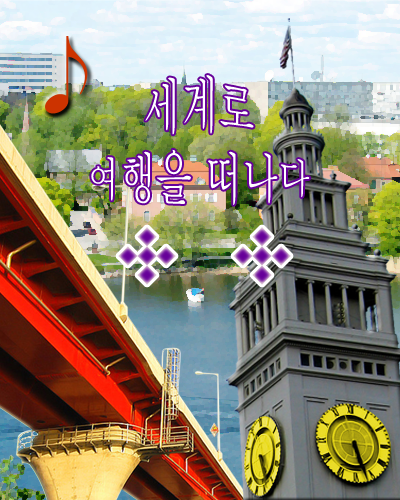
<style>
.page{position:relative;width:400px;height:500px}
.page>*{position:absolute;margin:0}
.t1{font:35px "Batang";color:#ffffff}
</style>
<div class="page">
<p class="t1" style="left:91px;top:75px;width:219px;height:130px;text-align:center">세계로<br>여행을 떠나다</p>
</div>
